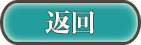
<style>
.page{position:relative;width:141px;height:45px}
.page>*{position:absolute;margin:0}
.t1{font:26px "RyuminPr6N-ExBold";color:#fff6f3}
</style>
<div class="page">
<p class="t1" style="left:45px;top:10px;width:49px;height:24px">返回</p>
</div>
